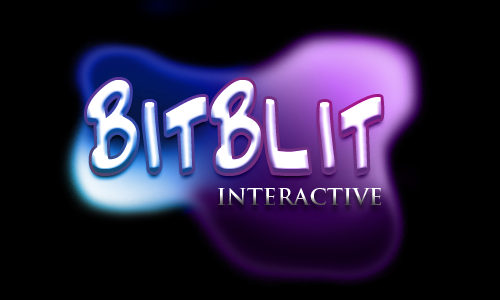
<style>
.page{position:relative;width:500px;height:300px;background:#000000}
.page>*{position:absolute;margin:0}
.t1{font:111.1px "JazzTextExtended"}
.t2{font:22.2px "TrajanPro-Bold"}
</style>
<div class="page">
<p class="t1" style="left:87px;top:80px;width:295px;height:93px">BitBlit</p>
<p class="t2" style="left:218px;top:188px;width:164px;height:17px">INTERACTIVE</p>
</div>
